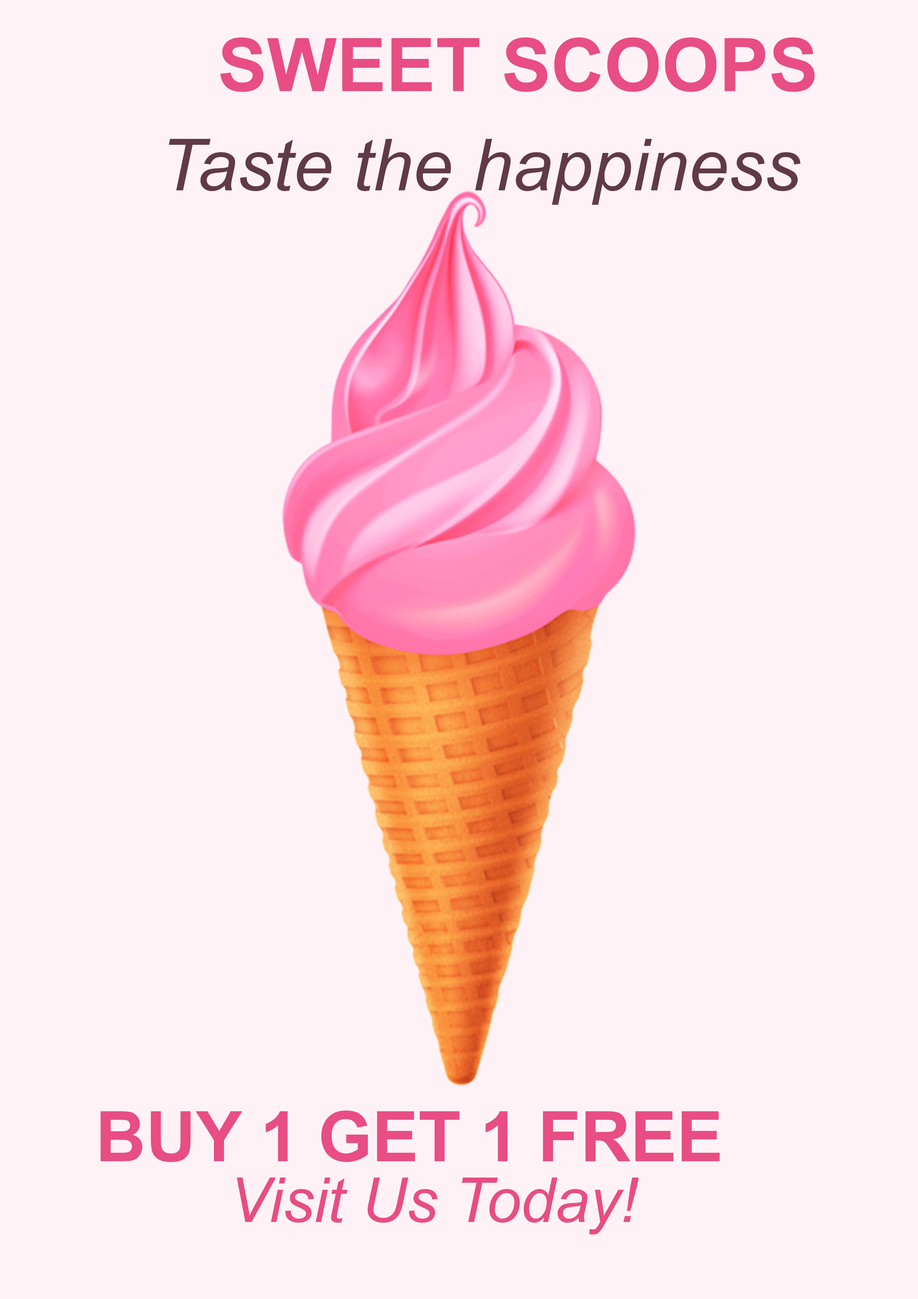
<style>
.page{position:relative;width:918px;height:1299px;background:#fff2f7}
.page>*{position:absolute;margin:0}
.t1{font:74px "Arial-BoldMT";color:#e84d83}
.t2{font:71.8px "Arial-ItalicMT";color:#603a45}
.t3{font:69.4px "Arial-BoldMT";color:#e84d83}
.t4{font:61.7px "Arial-ItalicMT";color:#e84d83}
</style>
<div class="page">
<p class="t1" style="left:220px;top:37px;width:595px;height:55px">SWEET SCOOPS</p>
<p class="t2" style="left:169px;top:139px;width:632px;height:66px">Taste the happiness</p>
<p class="t3" style="left:100px;top:1110px;width:620px;height:52px">BUY 1 GET 1 FREE</p>
<p class="t4" style="left:237px;top:1177px;width:402px;height:57px">Visit Us Today!</p>
</div>
